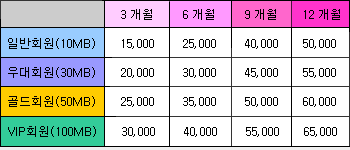
<style>
.page{position:relative;width:350px;height:150px;background:#ffffff}
.page>*{position:absolute;margin:0}
.t1{font:12px "Dotum";color:#000000}
</style>
<div class="page">
<p class="t1" style="left:121px;top:9px;width:219px;height:11px">3 개월       6 개월       9 개월      12 개월</p>
<p class="t1" style="left:8px;top:38px;width:328px;height:11px">일반회원(10MB)      15,000       25,000       40,000      50,000</p>
<p class="t1" style="left:8px;top:67px;width:328px;height:11px">우대회원(30MB)      20,000       30,000       45,000      55,000</p>
<p class="t1" style="left:8px;top:96px;width:328px;height:11px">골드회원(50MB)      25,000       35,000       50,000      60,000</p>
<p class="t1" style="left:8px;top:126px;width:329px;height:11px">VIP회원(100MB)      30,000       40,000       55,000      65,000</p>
</div>
